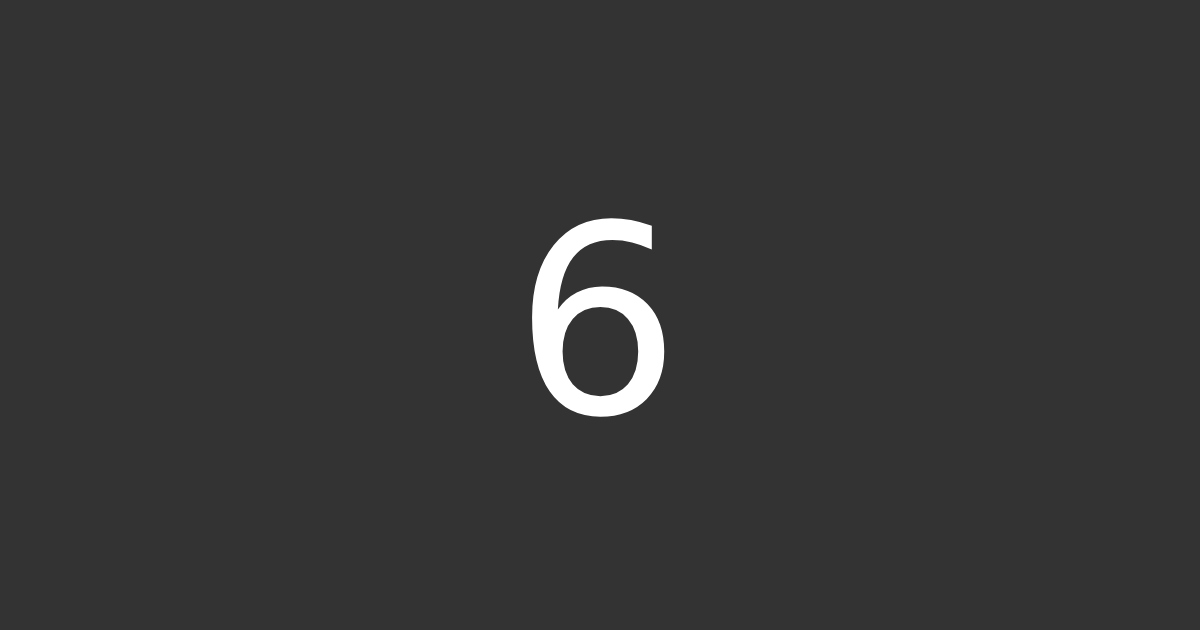
<style>
.page{position:relative;width:1200px;height:630px;background:#333333}
.page>*{position:absolute;margin:0}
.t1{font:262.5px "DejaVuSans";color:#ffffff}
</style>
<div class="page">
<p class="t1" style="left:532px;top:218px;width:133px;height:199px">6</p>
</div>
